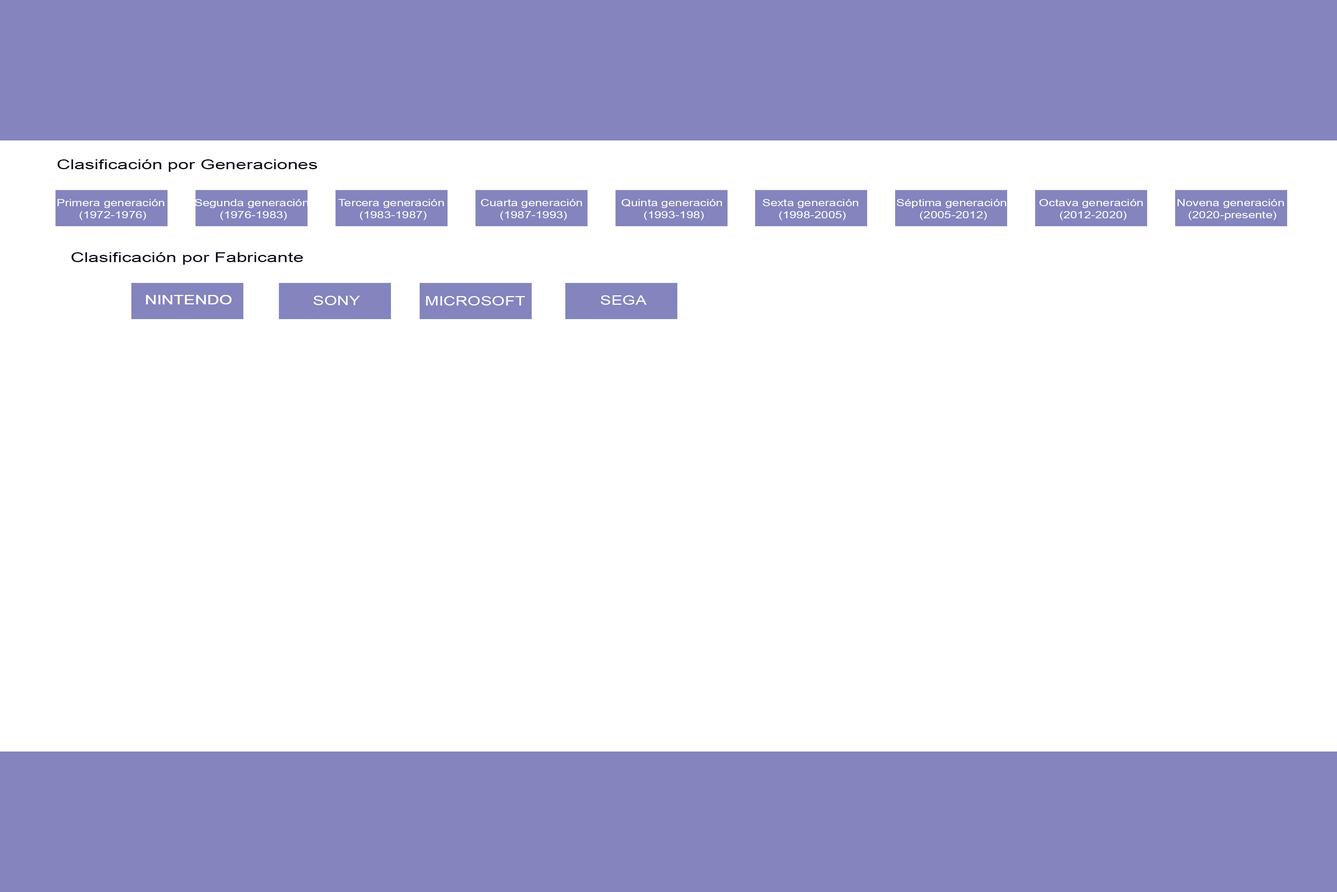
<style>
.page{position:relative;width:1337px;height:892px;background:#ffffff}
.page>*{position:absolute;margin:0}
.t1{font:13.6px "ArialMT";color:#050517;scale:1.39 1}
.t2{font:9.9px/11.7px "ArialMT";color:#ffffff;scale:1.26 1}
.t3{font:13.3px "ArialMT";color:#ffffff;scale:1.26 1}
</style>
<div class="page">
<p class="t1" style="left:57px;top:159px;width:260px;height:13px">Clasificación por Generaciones</p>
<p class="t2" style="left:57px;top:199px;width:108px;height:21px;text-align:center">Primera generación <br>(1972-1976)</p>
<p class="t2" style="left:195px;top:199px;width:114px;height:21px;text-align:center">Segunda generación <br>(1976-1983)</p>
<p class="t2" style="left:338px;top:199px;width:106px;height:21px;text-align:center">Tercera generación <br>(1983-1987)</p>
<p class="t2" style="left:481px;top:199px;width:101px;height:21px;text-align:center">Cuarta generación <br>(1987-1993)</p>
<p class="t2" style="left:622px;top:199px;width:100px;height:21px;text-align:center">Quinta generación <br>(1993-198)</p>
<p class="t2" style="left:763px;top:199px;width:96px;height:21px;text-align:center">Sexta generación <br>(1998-2005)</p>
<p class="t2" style="left:897px;top:199px;width:110px;height:21px;text-align:center">Séptima generación<br> (2005-2012)</p>
<p class="t2" style="left:1040px;top:199px;width:103px;height:21px;text-align:center">Octava generación <br>(2012-2020)</p>
<p class="t2" style="left:1178px;top:199px;width:107px;height:21px;text-align:center">Novena generación <br>(2020-presente)</p>
<p class="t1" style="left:71px;top:252px;width:232px;height:13px">Clasificación por Fabricante</p>
<p class="t3" style="left:146px;top:295px;width:86px;height:9px">NINTENDO</p>
<p class="t3" style="left:146px;top:295px;width:86px;height:9px">NINTENDO</p>
<p class="t3" style="left:146px;top:295px;width:86px;height:9px">NINTENDO</p>
<p class="t3" style="left:146px;top:295px;width:86px;height:9px">NINTENDO</p>
<p class="t3" style="left:314px;top:296px;width:46px;height:9px">SONY</p>
<p class="t3" style="left:426px;top:296px;width:99px;height:9px">MICROSOFT</p>
<p class="t3" style="left:601px;top:295px;width:46px;height:10px">SEGA</p>
</div>
